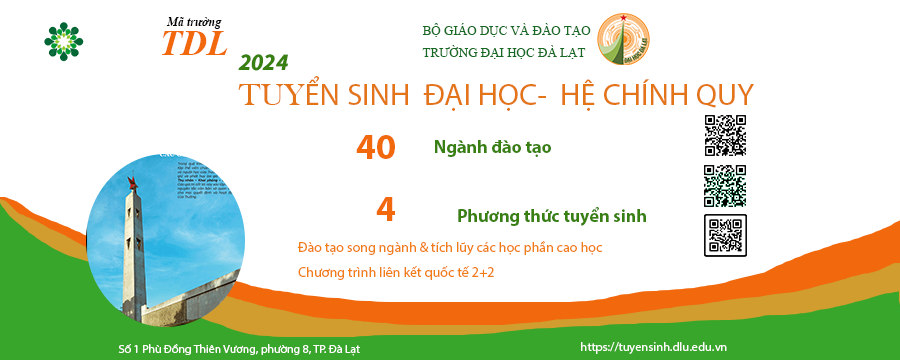
<style>
.page{position:relative;width:900px;height:360px;background:#ffffff}
.page>*{position:absolute;margin:0}
.t1{font:12px "TimesNewRomanPS-BoldItalicMT";color:#010101}
.t2{font:13px "TimesNewRomanPSMT";color:#166a23}
.t3{font:36px "TimesNewRomanPS-BoldItalicMT";color:#f1680d}
.t4{font:24px "SourceSansItalic-BoldItalic";color:#398013}
.t5{font:31.2px "MyriadPro-Regular";color:#e37418}
.t6{font:31.2px "BaskOldFace";color:#e37418}
.t7{font:18px "MyriadPro-Bold";color:#398013}
.t8{font:14px "MyriadPro-Regular";color:#f17d17}
.t9{font:12.4px "MyriadPro-Regular";color:#fffdfb}
.t10{font:11.8px "MyriadPro-Regular";color:#fffdfb}
</style>
<div class="page">
<p class="t1" style="left:166px;top:17px;width:56px;height:12px">Mã trường</p>
<p class="t2" style="left:422px;top:23px;width:169px;height:14px">BỘ GIÁO DỤC VÀ ĐÀO TẠO</p>
<p class="t3" style="left:162px;top:31px;width:66px;height:24px">TDL</p>
<p class="t4" style="left:238px;top:54px;width:50px;height:17px">2024</p>
<p class="t2" style="left:422px;top:45px;width:164px;height:14px">TRƯỜNG ĐẠI HỌC ĐÀ LẠT</p>
<p class="t5" style="left:238px;top:76px;width:516px;height:35px"><span class="t6">TUY</span>ỂN SINH  ĐẠI HỌC-  HỆ CHÍNH QUY</p>
<p class="t7" style="left:435px;top:140px;width:116px;height:17px">Ngành đào tạo</p>
<p class="t7" style="left:458px;top:207px;width:188px;height:19px">Phương thức tuyển sinh</p>
<p class="t8" style="left:297px;top:241px;width:305px;height:14px">Đào tạo song ngành &amp; tích lũy các học phần cao học</p>
<p class="t8" style="left:298px;top:266px;width:196px;height:14px">Chương trình liên kết quốc tế 2+2</p>
<p class="t9" style="left:581px;top:342px;width:146px;height:12px">https://tuyensinh.dlu.edu.vn</p>
<p class="t10" style="left:118px;top:344px;width:242px;height:12px">Số 1 Phù Đồng Thiên Vương, phường 8, TP. Đà Lạt</p>
</div>
